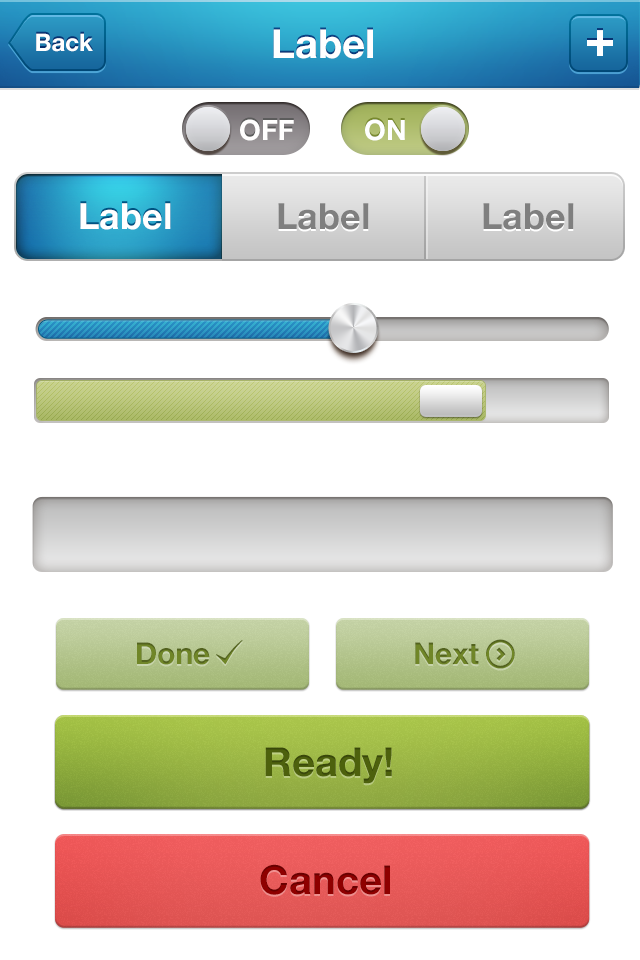
<style>
.page{position:relative;width:640px;height:960px;background:#ffffff}
.page>*{position:absolute;margin:0}
.t1{font:40px "HelveticaNeueLTStd-Bd";color:#ffffff}
.t2{font:24px "HelveticaNeue-Bold";color:#ffffff}
.t3{font:28px "HelveticaNeueLTStd-Bd";color:#fffefe}
.t4{font:28px "HelveticaNeueLTStd-Bd";color:#ffffff}
.t5{font:36px "HelveticaNeue-Bold";color:#ffffff}
.t6{font:36px "HelveticaNeue-Bold";color:#7f7f7f}
.t7{font:30.2px "HelveticaNeueLTStd-Bd";color:#708628}
.t8{font:40px "HelveticaNeueLTStd-Bd";color:#4d610d}
.t9{font:40px "HelveticaNeueLTStd-Bd";color:#8e0000}
</style>
<div class="page">
<p class="t1" style="left:273px;top:29px;width:100px;height:30px">Label</p>
<p class="t2" style="left:36px;top:33px;width:57px;height:19px">Back</p>
<p class="t3" style="left:240px;top:119px;width:54px;height:22px">OFF</p>
<p class="t4" style="left:365px;top:119px;width:40px;height:22px">ON</p>
<p class="t5" style="left:80px;top:203px;width:91px;height:27px">Label</p>
<p class="t6" style="left:278px;top:203px;width:91px;height:27px">Label</p>
<p class="t6" style="left:483px;top:203px;width:91px;height:27px">Label</p>
<p class="t7" style="left:137px;top:642px;width:73px;height:23px">Done</p>
<p class="t7" style="left:415px;top:642px;width:64px;height:23px">Next</p>
<p class="t8" style="left:265px;top:747px;width:127px;height:37px">Ready!</p>
<p class="t9" style="left:260px;top:864px;width:130px;height:31px">Cancel</p>
</div>
